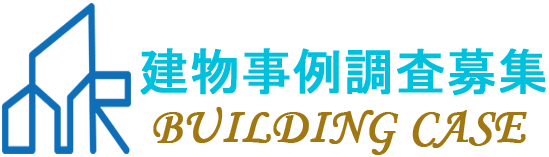
<style>
.page{position:relative;width:549px;height:157px;background:#ffffff}
.page>*{position:absolute;margin:0}
.t1{font:50px "MS-PGothic";color:#00c0dd;text-transform:uppercase;font-weight:bold}
.t2{font:50px "MonotypeCorsiva";color:#a17711;text-transform:uppercase;font-weight:bold}
</style>
<div class="page">
<p class="t1" style="left:140px;top:48px;width:406px;height:47px">建物事例調査募集</p>
<p class="t2" style="left:153px;top:107px;width:374px;height:48px">Building case</p>
</div>
